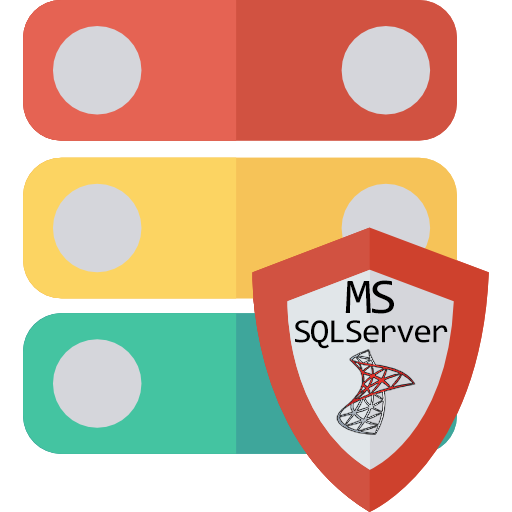
<style>
.page{position:relative;width:512px;height:512px;background:#ffffff}
.page>*{position:absolute;margin:0}
.t1{font:50px "Consolas";letter-spacing:-0.05em;color:#000000}
.t2{font:34.4px "Consolas";letter-spacing:-0.05em;color:#000000}
</style>
<div class="page">
<p class="t1" style="left:345px;top:280px;width:49px;height:34px">MS</p>
<p class="t2" style="left:295px;top:320px;width:153px;height:29px">SQLServer</p>
</div>
